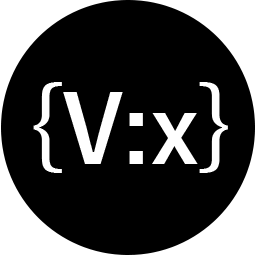
<style>
.page{position:relative;width:256px;height:256px;background:#000000}
.page>*{position:absolute;margin:0}
.t1{font:93.2px "YuGothic-Bold";color:#ffffff}
</style>
<div class="page">
<p class="t1" style="left:33px;top:82px;width:195px;height:91px">{     }</p>
<p class="t1" style="left:63px;top:92px;width:135px;height:72px">V:x</p>
</div>
